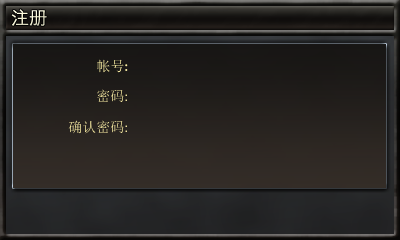
<style>
.page{position:relative;width:400px;height:240px}
.page>*{position:absolute;margin:0}
.t1{font:18px "STXihei";color:#fefcdd}
.t2{font:14px "SimSun";color:#fcefa5}
.t3{font:14px "Candara";color:#fcefa5}
.t4{font:14px "Calibri";color:#fcefa5}
</style>
<div class="page">
<p class="t1" style="left:11px;top:9px;width:36px;height:17px">注册</p>
<p class="t2" style="left:97px;top:59px;width:31px;height:14px">帐号<span class="t3">:</span></p>
<p class="t2" style="left:97px;top:89px;width:30px;height:13px">密码<span class="t4">:</span></p>
<p class="t2" style="left:68px;top:120px;width:59px;height:14px">确认密码<span class="t4">:</span></p>
</div>
